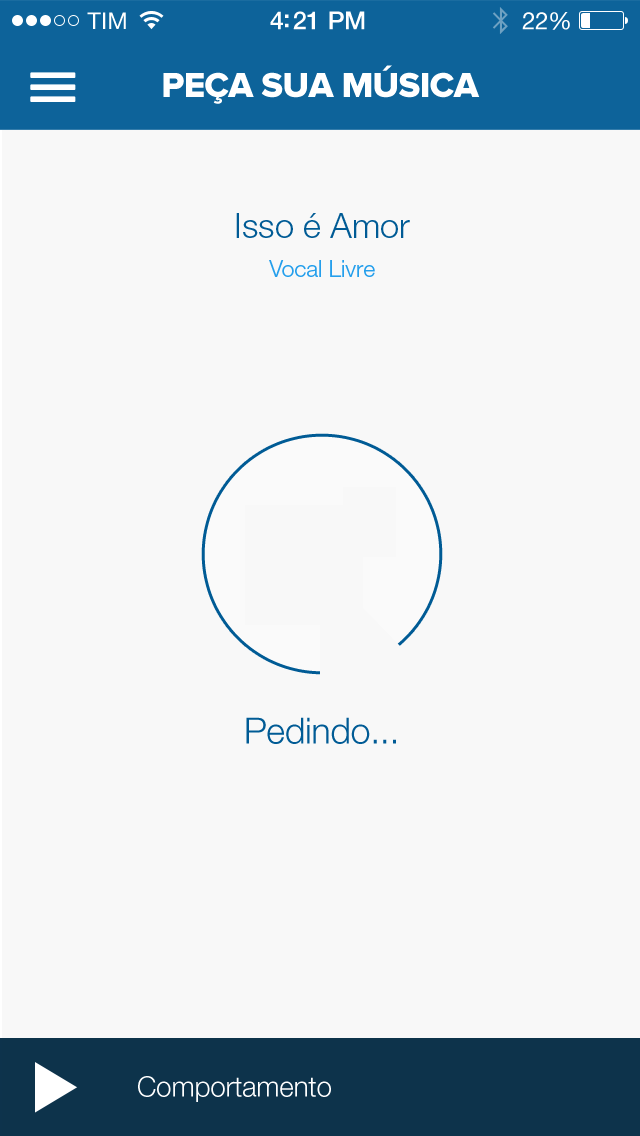
<style>
.page{position:relative;width:640px;height:1136px;background:#f8f8f8}
.page>*{position:absolute;margin:0}
.t1{font:36px "ProximaNova-Extrabld";letter-spacing:-0.02em;color:#ffffff;text-transform:uppercase}
.t2{font:34px/39px "HelveticaNeueLTStd-Lt";color:#005b95}
.t3{font:23px/39px "HelveticaNeueLTStd-Lt";color:#259fec}
.t4{font:36px "HelveticaNeueLTStd-Lt";letter-spacing:-0.01em;color:#005b95}
.t5{font:28px "HelveticaNeueLTStd-Lt";letter-spacing:-0.01em;color:#ffffff}
</style>
<div class="page">
<p class="t1" style="left:163px;top:65px;width:317px;height:39px">PEÇA SUA MÚSICA</p>
<p class="t2" style="left:236px;top:213px;width:174px;height:64px;text-align:center">Isso é Amor<br><span class="t3">Vocal Livre</span></p>
<p class="t4" style="left:246px;top:717px;width:150px;height:27px">Pedindo...</p>
<p class="t5" style="left:138px;top:1076px;width:193px;height:26px">Comportamento</p>
</div>
